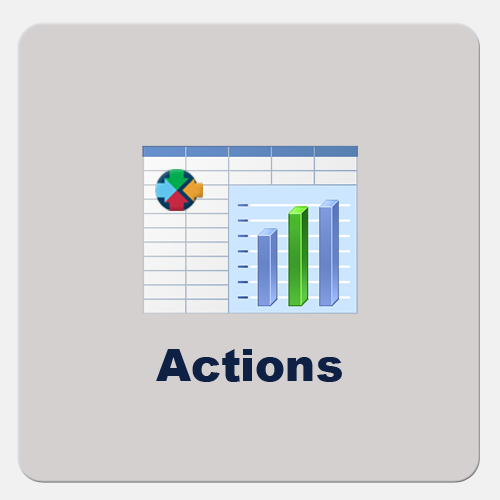
<style>
.page{position:relative;width:500px;height:500px;background:#d4d0d0}
.page>*{position:absolute;margin:0}
.t1{font:45px "Arial-Black";color:#0e2144}
</style>
<div class="page">
<p class="t1" style="left:156px;top:349px;width:186px;height:33px">Actions</p>
</div>
